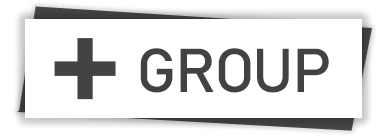
<style>
.page{position:relative;width:384px;height:137px;background:#ffffff}
.page>*{position:absolute;margin:0}
.t1{font:153.5px "Bahnschrift";letter-spacing:-0.04em;color:#434343}
.t2{font:61px "Bahnschrift";letter-spacing:-0.04em;color:#424242;scale:1.05 1}
</style>
<div class="page">
<p class="t1" style="left:54px;top:38px;width:62px;height:62px">+</p>
<p class="t2" style="left:140px;top:48px;width:189px;height:45px">GROUP</p>
</div>
